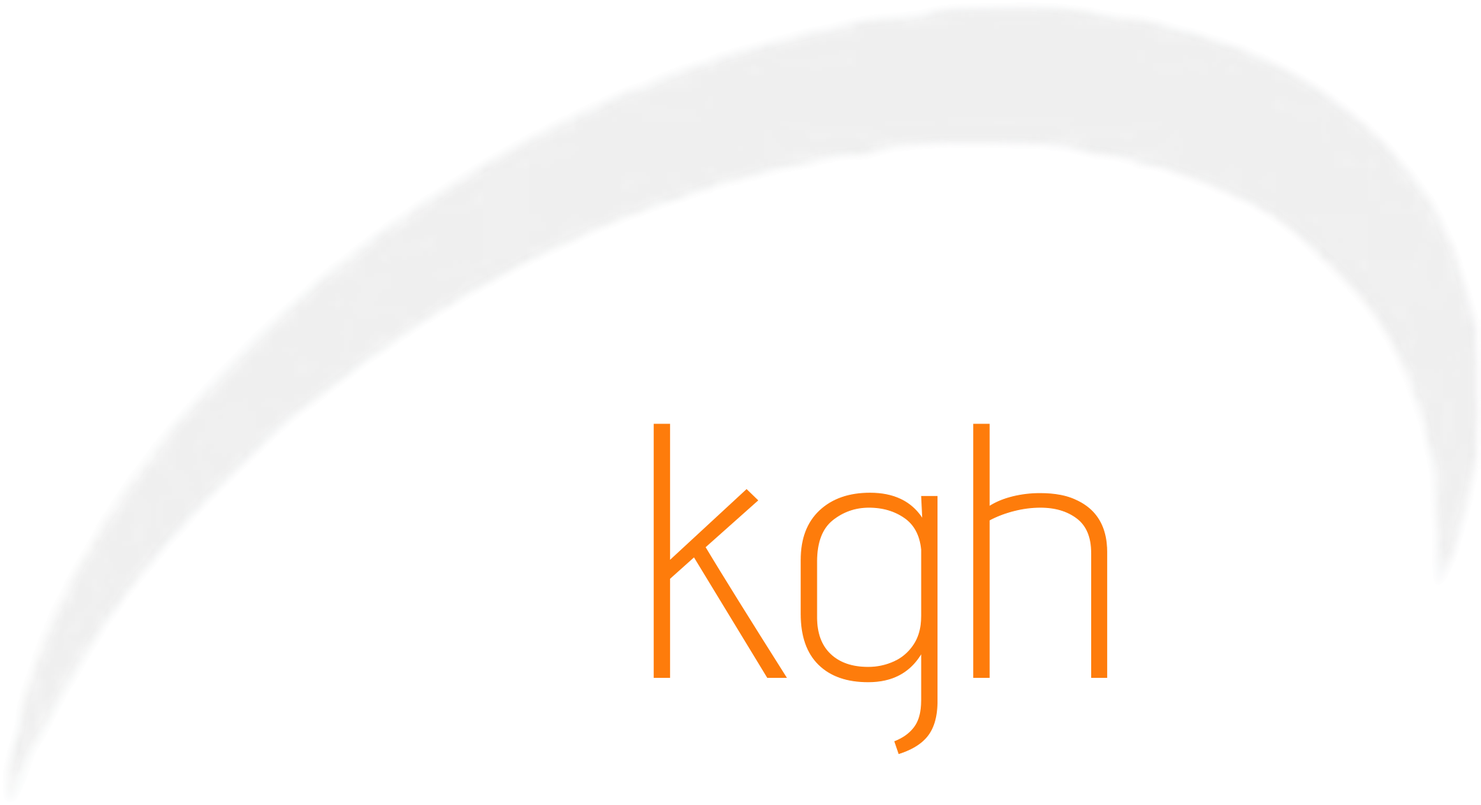
<style>
.page{position:relative;width:1481px;height:805px;background:#ffffff}
.page>*{position:absolute;margin:0}
.t1{font:362.9px "AdventPro-Light";color:#fe7c0b}
</style>
<div class="page">
<p class="t1" style="left:653px;top:423px;width:455px;height:332px">kgh</p>
</div>
